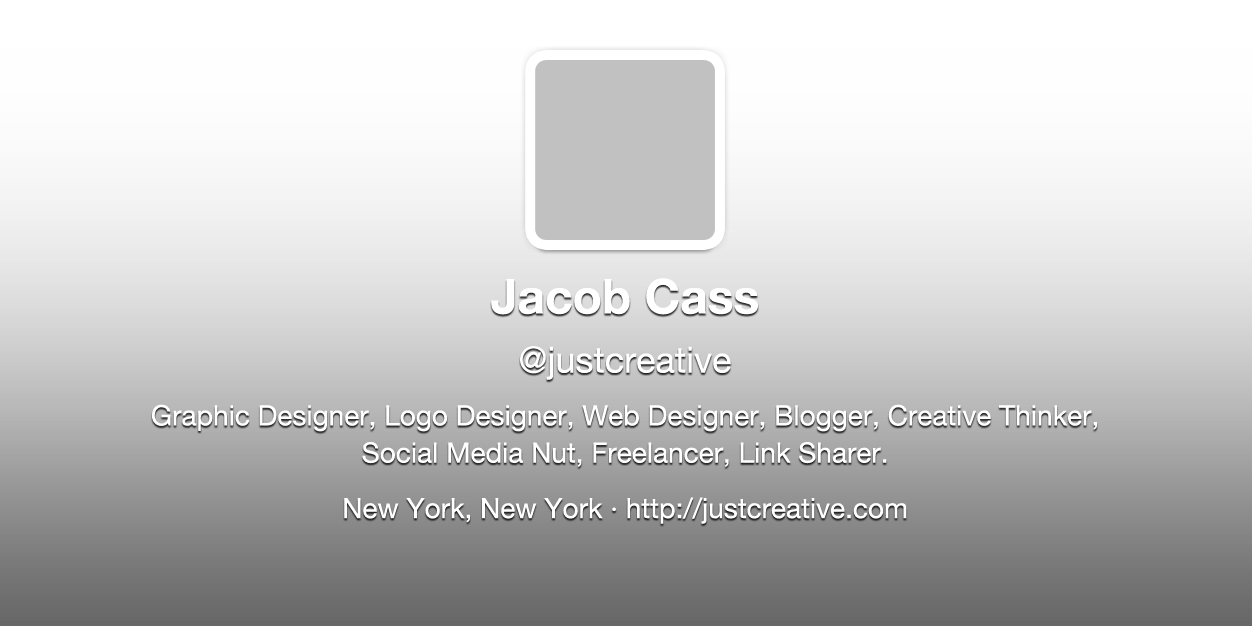
<style>
.page{position:relative;width:1252px;height:626px}
.page>*{position:absolute;margin:0}
.t1{font:48px "HelveticaNeue-Bold";color:#ffffff}
.t2{font:36px "HelveticaNeue";color:#ffffff}
.t3{font:28px/37.2px "HelveticaNeue";color:#ffffff}
.t4{font:28px "HelveticaNeue";color:#ffffff}
</style>
<div class="page">
<p class="t1" style="left:491px;top:278px;width:267px;height:37px">Jacob Cass</p>
<p class="t2" style="left:520px;top:346px;width:211px;height:34px">@justcreative</p>
<p class="t3" style="left:152px;top:404px;width:945px;height:63px;text-align:center">Graphic Designer, Logo Designer, Web Designer, Blogger, Creative Thinker,<br>Social Media Nut, Freelancer, Link Sharer.</p>
<p class="t4" style="left:344px;top:497px;width:563px;height:27px">New York, New York · http://justcreative.com</p>
</div>
